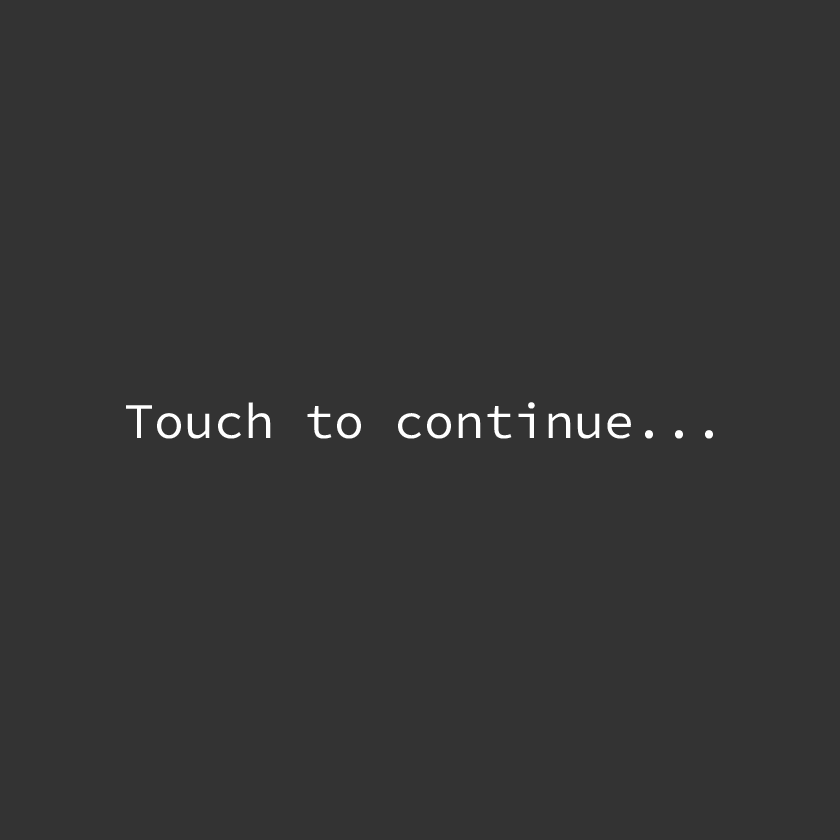
<style>
.page{position:relative;width:840px;height:840px;background:#333333}
.page>*{position:absolute;margin:0}
.t1{font:50px "SourceCodeVariable-Roman";color:#ffffff}
</style>
<div class="page">
<p class="t1" style="left:126px;top:402px;width:587px;height:37px">Touch to continue...</p>
</div>
